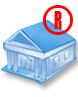
<style>
.page{position:relative;width:78px;height:97px;background:#ffffff}
.page>*{position:absolute;margin:0}
.t1{font:23.4px "Impact";letter-spacing:0.16em;color:#ff0000;scale:0.65 1}
</style>
<div class="page">
<p class="t1" style="left:54px;top:11px;width:8px;height:18px">R</p>
</div>
